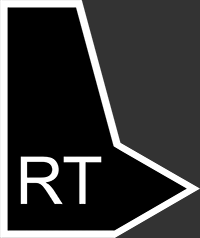
<style>
.page{position:relative;width:200px;height:238px;background:#000000}
.page>*{position:absolute;margin:0}
.t1{font:66.1px "ArialMT";color:#ffffff}
</style>
<div class="page">
<p class="t1" style="left:20px;top:156px;width:82px;height:48px">RT</p>
</div>
